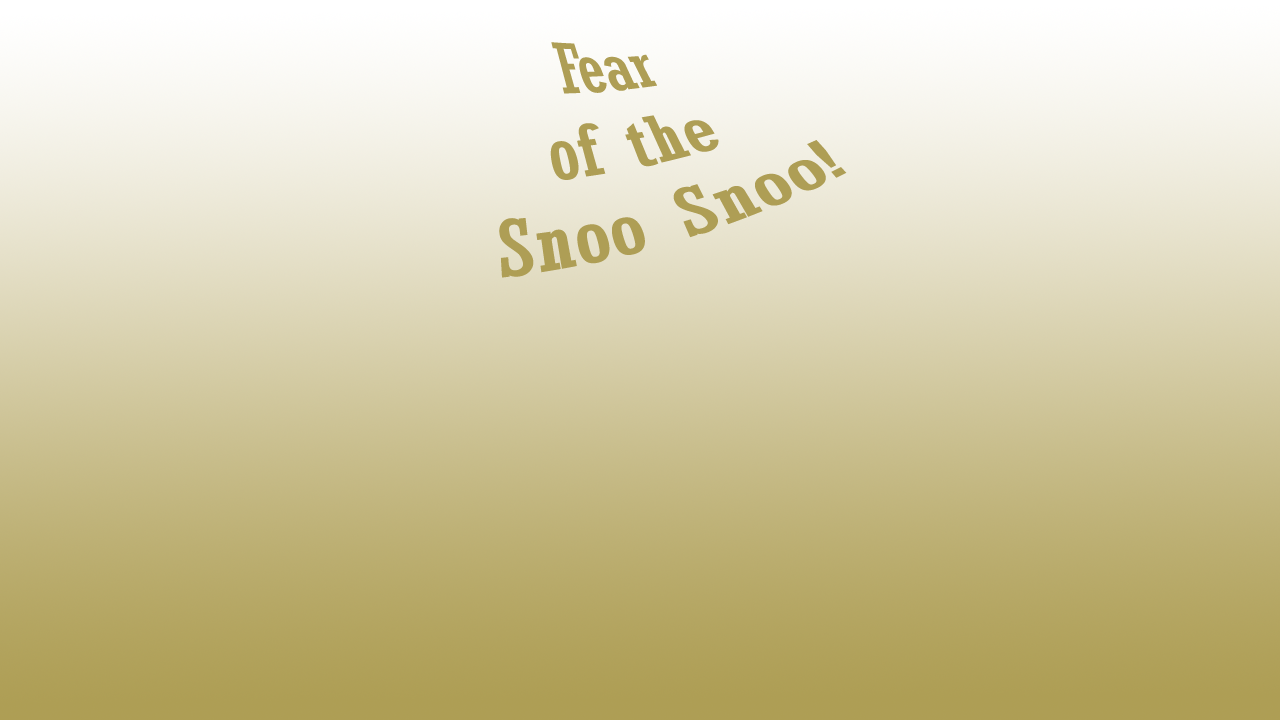
<style>
.page{position:relative;width:1280px;height:720px}
.page>*{position:absolute;margin:0}
.t1{font:72px "Rockwell-Condensed";color:#ae9e55}
</style>
<div class="page">
<p class="t1" style="left:499px;top:42px;width:348px;height:236px">Fear <br>                      of the <br>                    Snoo Snoo!</p>
</div>
